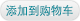
<style>
.page{position:relative;width:80px;height:21px}
.page>*{position:absolute;margin:0}
.t1{font:11.7px "STXihei";color:#088b9a;scale:0.96 1}
</style>
<div class="page">
<p class="t1" style="left:6px;top:5px;width:67px;height:11px">添加到购物车</p>
</div>
